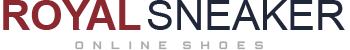
<style>
.page{position:relative;width:350px;height:50px;background:#ffffff}
.page>*{position:absolute;margin:0}
.t1{font:41.7px "Arial-BoldMT";color:#8c2830}
.t2{font:41.7px "ArialMT";color:#202739}
</style>
<div class="page">
<p class="t1" style="left:3px;top:0px;width:138px;height:30px">ROYAL</p>
<p class="t2" style="left:147px;top:0px;width:198px;height:30px">SNEAKER</p>
</div>
